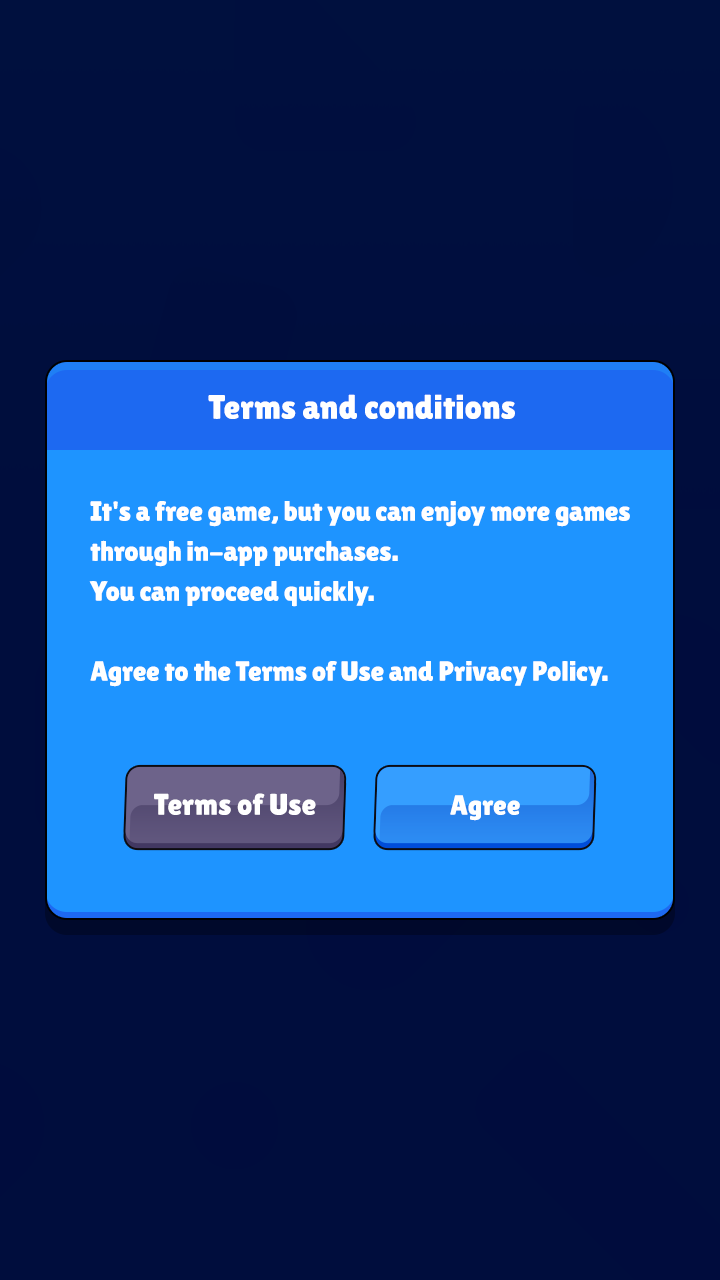
<style>
.page{position:relative;width:720px;height:1280px;background:#000d3d}
.page>*{position:absolute;margin:0}
.t1{font:34px "LilitaOne";color:#ffffff}
.t2{font:28px/40px "LilitaOne";letter-spacing:-0.01em;color:#ffffff}
.t3{font:30px "LilitaOne";color:#ffffff}
.t4{font:28px "LilitaOne";color:#ffffff}
</style>
<div class="page">
<p class="t1" style="left:208px;top:394px;width:307px;height:25px">Terms and conditions</p>
<p class="t2" style="left:89px;top:501px;width:541px;height:186px">It's a free game, but you can enjoy more games <br>through in-app purchases. <br>You can proceed quickly. <br><br>Agree to the Terms of Use and Privacy Policy.</p>
<p class="t3" style="left:154px;top:793px;width:162px;height:22px">Terms of Use</p>
<p class="t4" style="left:450px;top:795px;width:70px;height:26px">Agree</p>
</div>
